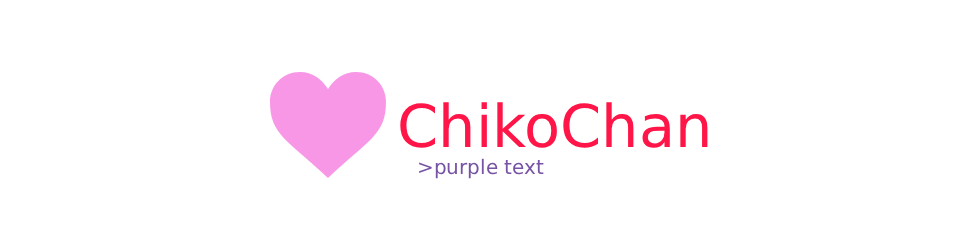
<style>
.page{position:relative;width:980px;height:250px;background:#ffffff}
.page>*{position:absolute;margin:0}
.t1{font:59px "DejaVuSans";color:#ff1547}
.t2{font:20px "DejaVuSans";color:#7753a5}
</style>
<div class="page">
<p class="t1" style="left:400px;top:102px;width:308px;height:46px">ChikoChan</p>
<p class="t2" style="left:419px;top:158px;width:125px;height:21px">&gt;purple text</p>
</div>
